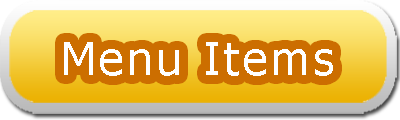
<style>
.page{position:relative;width:400px;height:120px}
.page>*{position:absolute;margin:0}
.t1{font:45.8px "Tahoma";letter-spacing:0.08em;color:#ffffff}
</style>
<div class="page">
<p class="t1" style="left:64px;top:42px;width:269px;height:34px">Menu Items</p>
</div>
